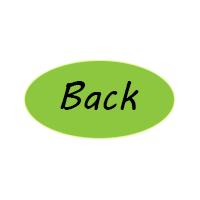
<style>
.page{position:relative;width:200px;height:200px;background:#ffffff}
.page>*{position:absolute;margin:0}
.t1{font:40px "MVBoli";color:#000000}
</style>
<div class="page">
<p class="t1" style="left:60px;top:81px;width:79px;height:29px">Back</p>
</div>
